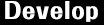
<style>
.page{position:relative;width:104px;height:25px;background:#000000}
.page>*{position:absolute;margin:0}
.t1{font:21.9px "FolkPro-Heavy";letter-spacing:0.05em;color:#ffffff;scale:0.94 1}
</style>
<div class="page">
<p class="t1" style="left:5px;top:1px;width:93px;height:21px">Develop</p>
</div>
